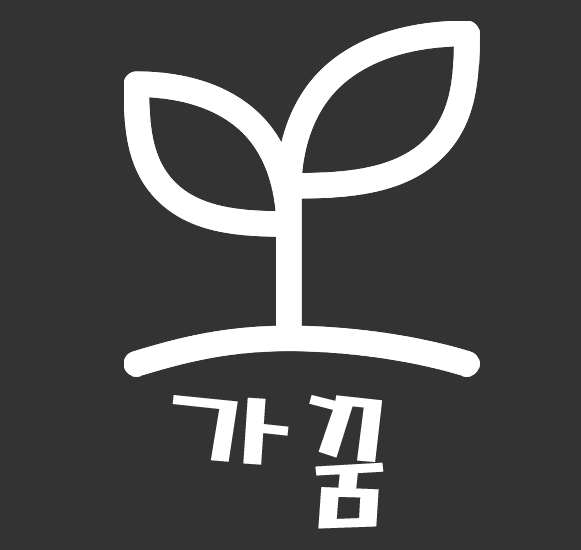
<style>
.page{position:relative;width:581px;height:550px;background:#333333}
.page>*{position:absolute;margin:0}
.t1{font:150px "MagicR-HM";color:#ffffff}
</style>
<div class="page">
<p class="t1" style="left:172px;top:395px;width:212px;height:134px">가꿈</p>
</div>
